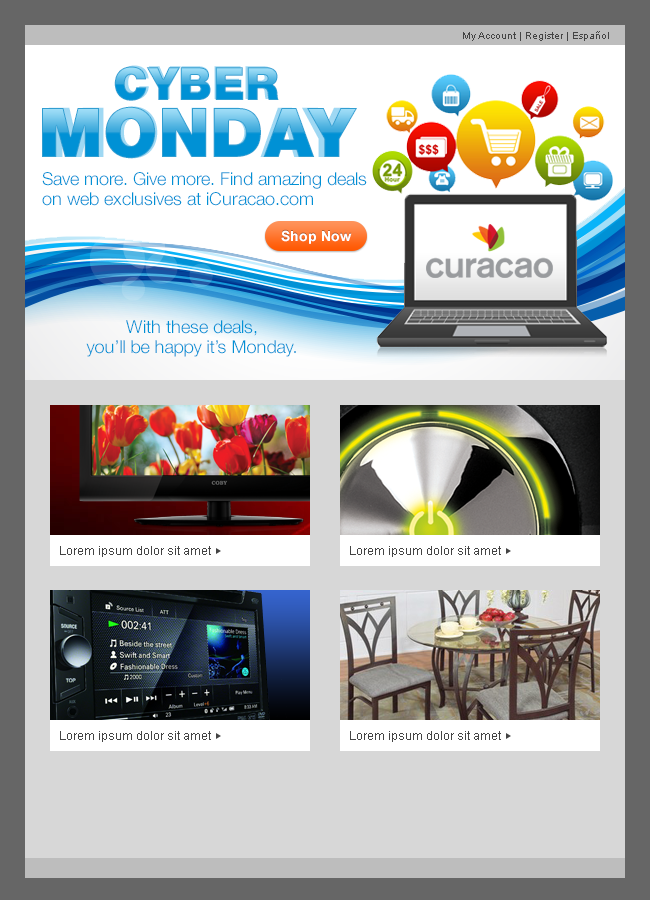
<style>
.page{position:relative;width:650px;height:900px;background:#d7d7d7}
.page>*{position:absolute;margin:0}
.t1{font:10px "ArialMT";color:#444444}
.t2{font:45.9px "HelveticaNeue-Black";scale:0.96 1}
.t3{font:45.9px "HelveticaNeue-Black"}
.t4{font:68.8px "HelveticaNeue-Black"}
.t5{font:68.8px "HelveticaNeue-Black";scale:0.96 1}
.t6{font:18px/22px "HelveticaNeue-Light";color:#0091d5}
.t7{font:18px/20px "HelveticaNeue-Light";color:#0091d5}
.t8{font:18px/18px "HelveticaNeue-Light";color:#0091d5}
.t9{font:12px "ArialMT";color:#444444}
</style>
<div class="page">
<p class="t1" style="left:463px;top:31px;width:146px;height:10px">My Account | Register | Español</p>
<p class="t2" style="left:118px;top:65px;width:158px;height:35px">CYBER</p>
<p class="t3" style="left:114px;top:66px;width:165px;height:35px">CYBER</p>
<p class="t4" style="left:42px;top:106px;width:315px;height:53px"><span class="t3"><br></span>MONDAY</p>
<p class="t5" style="left:48px;top:106px;width:302px;height:53px"><span class="t2"><br></span>MONDAY</p>
<p class="t6" style="left:42px;top:172px;width:325px;height:34px">Save more. Give more. Find amazing deals <span class="t7">on web exclusives at iCuracao.com</span></p>
<p class="t7" style="left:86px;top:320px;width:210px;height:37px;text-align:center"><span class="t8">With these deals,<br></span>you’ll be happy it’s Monday.</p>
<p class="t9" style="left:60px;top:546px;width:151px;height:11px">Lorem ipsum dolor sit amet</p>
<p class="t9" style="left:350px;top:546px;width:151px;height:11px">Lorem ipsum dolor sit amet</p>
<p class="t9" style="left:60px;top:731px;width:151px;height:11px">Lorem ipsum dolor sit amet</p>
<p class="t9" style="left:350px;top:731px;width:151px;height:11px">Lorem ipsum dolor sit amet</p>
</div>
